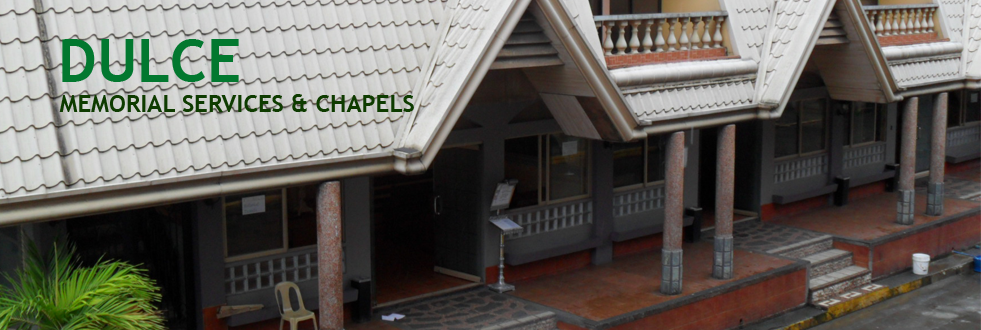
<style>
.page{position:relative;width:981px;height:330px}
.page>*{position:absolute;margin:0}
.t1{font:60px "TrebuchetMS-Bold";color:#02782f}
.t2{font:24px "TrebuchetMS-Bold";color:#0e3b00}
</style>
<div class="page">
<p class="t1" style="left:62px;top:39px;width:177px;height:43px">DULCE</p>
<p class="t2" style="left:59px;top:94px;width:355px;height:18px">MEMORIAL SERVICES &amp; CHAPELS</p>
</div>
